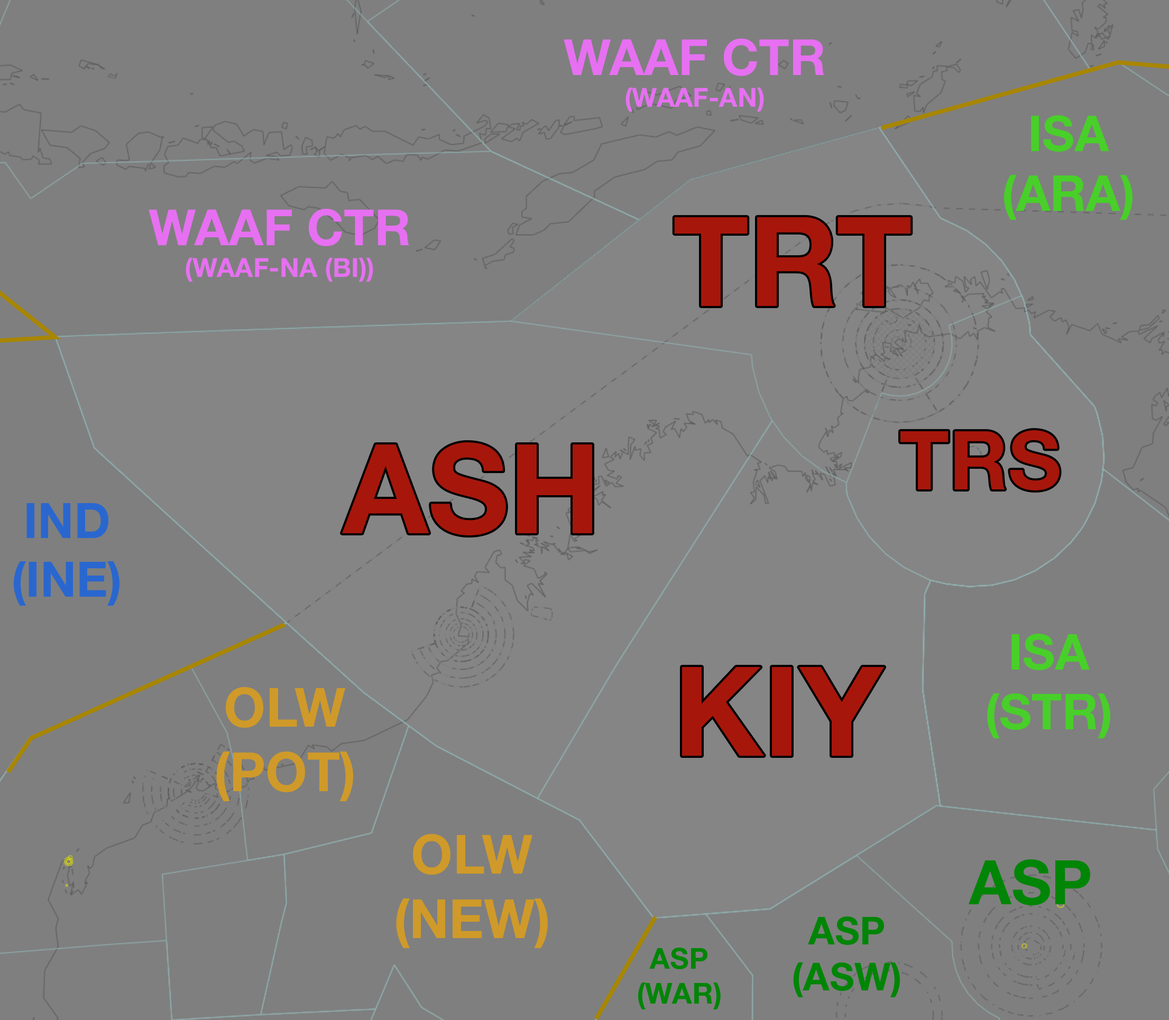
<style>
.page{position:relative;width:1169px;height:1020px;background:#7f7f7f}
.page>*{position:absolute;margin:0}
.t1{font:26.4px "HelveticaNeue-Bold";color:#e670f1}
.t2{font:50px "HelveticaNeue-Bold";color:#e670f1}
.t3{font:49.9px "HelveticaNeueLTStd-Bd";color:#48cf29}
.t4{font:124.2px "HelveticaNeueLTStd-Bd";color:#a7160b}
.t5{font:81.7px "HelveticaNeueLTStd-Bd";color:#a7160b}
.t6{font:48.8px "HelveticaNeueLTStd-Bd";color:#2967cf}
.t7{font:53.8px "HelveticaNeueLTStd-Bd";color:#cf9a29}
.t8{font:61.5px "HelveticaNeueLTStd-Bd";color:#008506}
.t9{font:38.4px "HelveticaNeueLTStd-Bd";color:#008506}
.t10{font:29.1px "HelveticaNeueLTStd-Bd";color:#008506}
</style>
<div class="page">
<p class="t1" style="left:564px;top:39px;width:260px;height:73px;text-align:center"><span class="t2">WAAF CTR<br></span>(WAAF-AN)</p>
<p class="t3" style="left:1004px;top:115px;width:128px;height:105px;text-align:center">ISA<br>(ARA)</p>
<p class="t1" style="left:149px;top:209px;width:260px;height:73px;text-align:center"><span class="t2">WAAF CTR<br></span>(WAAF-NA (BI))</p>
<p class="t4" style="left:674px;top:217px;width:237px;height:89px">TRT</p>
<p class="t5" style="left:900px;top:430px;width:159px;height:61px">TRS</p>
<p class="t4" style="left:342px;top:442px;width:250px;height:94px">ASH</p>
<p class="t6" style="left:14px;top:503px;width:105px;height:103px;text-align:center">IND<br>(INE)</p>
<p class="t3" style="left:987px;top:634px;width:123px;height:104px;text-align:center">ISA<br>(STR)</p>
<p class="t4" style="left:682px;top:667px;width:202px;height:89px">KIY</p>
<p class="t7" style="left:216px;top:687px;width:137px;height:114px;text-align:center">OLW<br>(POT)</p>
<p class="t7" style="left:396px;top:834px;width:152px;height:114px;text-align:center">OLW<br>(NEW)</p>
<p class="t8" style="left:968px;top:860px;width:122px;height:46px">ASP</p>
<p class="t9" style="left:793px;top:917px;width:107px;height:81px;text-align:center">ASP<br>(ASW)</p>
<p class="t10" style="left:638px;top:948px;width:83px;height:62px;text-align:center">ASP<br>(WAR)</p>
</div>
